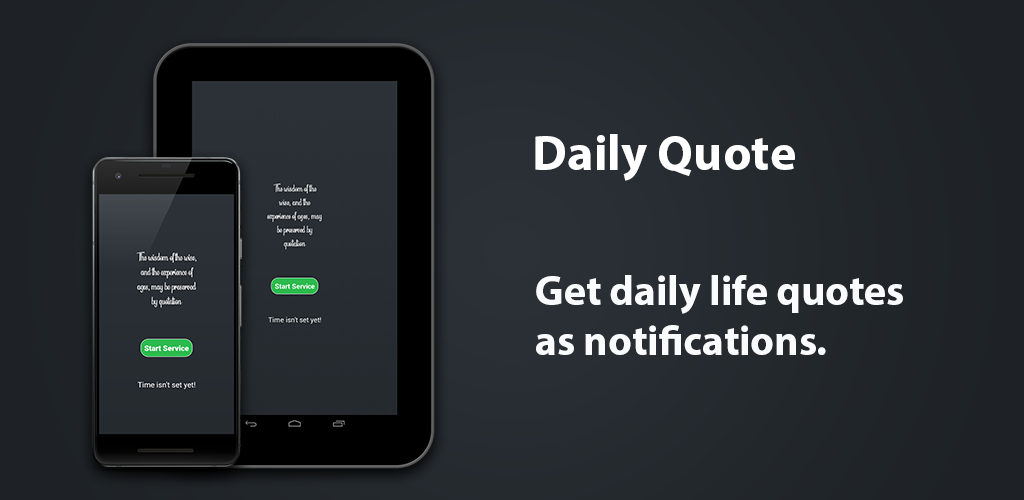
<style>
.page{position:relative;width:1024px;height:500px}
.page>*{position:absolute;margin:0}
.t1{font:12px "MyriadPro-Bold";color:#ffffff}
.t2{font:41.7px "MyriadPro-Bold";color:#ffffff}
</style>
<div class="page">
<p class="t1" style="left:535px;top:134px;width:260px;height:47px;text-align:center">Daily Quote</p>
<p class="t2" style="left:536px;top:275px;width:367px;height:80px">Get daily life quotes<br>as notifications.</p>
</div>
